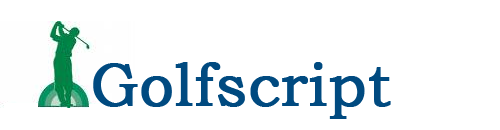
<style>
.page{position:relative;width:500px;height:130px;background:#ffffff}
.page>*{position:absolute;margin:0}
.t1{font:60px "BookmanOldStyle";color:#004a80;font-weight:bold}
</style>
<div class="page">
<p class="t1" style="left:93px;top:62px;width:298px;height:57px">Golfscript</p>
</div>
